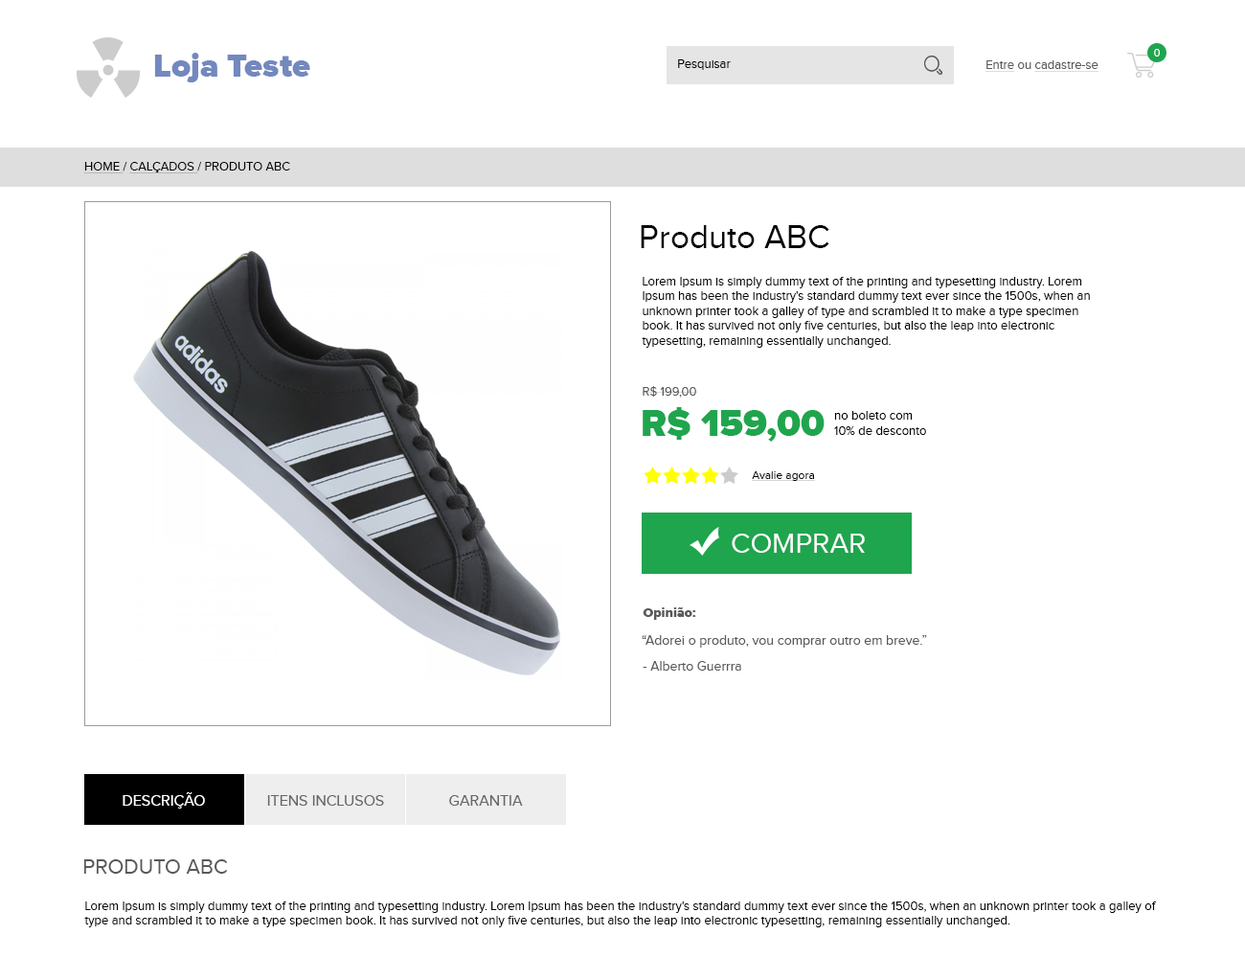
<style>
.page{position:relative;width:1245px;height:958px;background:#ffffff}
.page>*{position:absolute;margin:0}
.t1{font:33.5px "ProximaNova-Black";color:#7388be}
.t2{font:10.5px "ProximaNova-Regular";color:#ffffff}
.t3{font:12.5px "ProximaNova-Regular";color:#000000}
.t4{font:12.5px "ProximaNova-Regular";color:#595959;text-decoration:underline}
.t5{font:12.5px "ProximaNova-Regular";color:#595959}
.t6{font:12.5px "ProximaNova-Regular";color:#070707}
.t7{font:12.5px "ProximaNova-Regular";color:#070707;text-decoration:underline}
.t8{font:33.5px "ProximaNova-Regular";color:#070707}
.t9{font:38.3px "ProximaNova-Black";color:#1fa54e}
.t10{font:11.5px "ProximaNova-Regular";color:#070707;text-decoration:underline}
.t11{font:28.7px "ProximaNova-Regular";color:#ffffff}
.t12{font:13.4px "ProximaNova-Black";color:#595959}
.t13{font:13.4px "ProximaNova-Regular";color:#595959}
.t14{font:15.3px "ProximaNova-Regular";color:#ffffff}
.t15{font:15.3px "ProximaNova-Regular";color:#666666}
.t16{font:21.1px "ProximaNova-Regular";color:#595959}
</style>
<div class="page">
<p class="t1" style="left:154px;top:53px;width:156px;height:29px">Loja Teste</p>
<p class="t2" style="left:1154px;top:49px;width:6px;height:8px">0</p>
<p class="t3" style="left:678px;top:59px;width:53px;height:11px">Pesquisar</p>
<p class="t4" style="left:986px;top:60px;width:113px;height:12px">Entre<span class="t5"> ou </span>cadastre-se</p>
<p class="t6" style="left:83px;top:161px;width:207px;height:12px"><span class="t7">HOME </span>/ <span class="t7">CALÇADOS </span>/ PRODUTO ABC</p>
<p class="t8" style="left:641px;top:225px;width:188px;height:23px">Produto ABC</p>
<p class="t6" style="left:642px;top:277px;width:448px;height:71px">Lorem Ipsum is simply dummy text of the printing and typesetting industry. Lorem Ipsum has been the industry's standard dummy text ever since the 1500s, when an unknown printer took a galley of type and scrambled it to make a type specimen book. It has survived not only five centuries, but also the leap into electronic typesetting, remaining essentially unchanged.</p>
<p class="t5" style="left:642px;top:386px;width:55px;height:11px">R$ 199,00</p>
<p class="t9" style="left:643px;top:407px;width:182px;height:35px">R$ 159,00</p>
<p class="t3" style="left:834px;top:411px;width:92px;height:24px">no boleto com<br>10% de desconto</p>
<p class="t10" style="left:752px;top:471px;width:63px;height:10px">Avalie agora</p>
<p class="t11" style="left:732px;top:533px;width:133px;height:20px">COMPRAR</p>
<p class="t12" style="left:643px;top:607px;width:53px;height:13px">Opinião:</p>
<p class="t13" style="left:642px;top:635px;width:285px;height:12px">“Adorei o produto, vou comprar outro em breve.”</p>
<p class="t13" style="left:643px;top:661px;width:98px;height:9px">- Alberto Guerrra</p>
<p class="t14" style="left:123px;top:792px;width:82px;height:16px">DESCRIÇÃO</p>
<p class="t15" style="left:267px;top:795px;width:117px;height:10px">ITENS INCLUSOS</p>
<p class="t15" style="left:449px;top:795px;width:74px;height:10px">GARANTIA</p>
<p class="t16" style="left:83px;top:859px;width:145px;height:14px">PRODUTO ABC</p>
<p class="t6" style="left:84px;top:901px;width:1073px;height:26px">Lorem Ipsum is simply dummy text of the printing and typesetting industry. Lorem Ipsum has been the industry's standard dummy text ever since the 1500s, when an unknown printer took a galley of type and scrambled it to make a type specimen book. It has survived not only five centuries, but also the leap into electronic typesetting, remaining essentially unchanged.</p>
</div>
